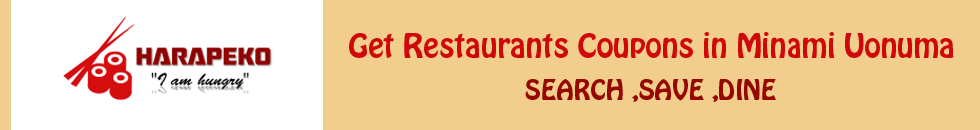
<style>
.page{position:relative;width:980px;height:130px;background:#f1ce8c}
.page>*{position:absolute;margin:0}
.t1{font:30px "HoboStd";color:#d0080b}
.t2{font:25px "HoboStd";color:#960700}
</style>
<div class="page">
<p class="t1" style="left:349px;top:32px;width:605px;height:26px">Get Restaurants Coupons in Minami Uonuma</p>
<p class="t2" style="left:525px;top:79px;width:251px;height:23px">SEARCH ,SAVE ,DINE</p>
</div>
